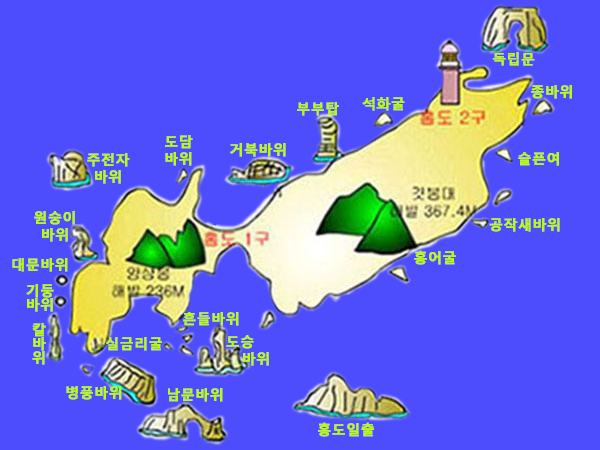
<style>
.page{position:relative;width:600px;height:450px;background:#4d4dfe}
.page>*{position:absolute;margin:0}
.t1{font:14px "MalgunGothicBold";color:#befc02;font-weight:bold}
.t2{font:14.1px "MalgunGothicBold";color:#befc02;font-weight:bold}
.t3{font:14.1px/14px "MalgunGothicBold";color:#befc02;font-weight:bold}
</style>
<div class="page">
<p class="t1" style="left:492px;top:52px;width:43px;height:14px">독립문</p>
<p class="t2" style="left:531px;top:85px;width:41px;height:14px">종바위</p>
<p class="t2" style="left:297px;top:102px;width:42px;height:14px">부부탑</p>
<p class="t1" style="left:362px;top:97px;width:43px;height:14px">석화굴</p>
<p class="t2" style="left:165px;top:135px;width:28px;height:31px">도담<br>바위</p>
<p class="t2" style="left:230px;top:143px;width:56px;height:14px">거북바위</p>
<p class="t2" style="left:87px;top:153px;width:43px;height:31px;text-align:center">주전자<br>바위</p>
<p class="t2" style="left:518px;top:152px;width:41px;height:14px">슬픈여</p>
<p class="t2" style="left:34px;top:211px;width:41px;height:31px;text-align:center">원숭이<br>바위</p>
<p class="t2" style="left:489px;top:218px;width:71px;height:14px">공작새바위</p>
<p class="t2" style="left:414px;top:250px;width:42px;height:15px">홍어굴</p>
<p class="t2" style="left:12px;top:258px;width:56px;height:14px">대문바위</p>
<p class="t3" style="left:26px;top:284px;width:28px;height:28px;text-align:center">기둥<br>바위</p>
<p class="t2" style="left:183px;top:312px;width:56px;height:14px">흔들바위</p>
<p class="t3" style="left:32px;top:323px;width:14px;height:42px;text-align:center">칼<br>바<br>위</p>
<p class="t2" style="left:106px;top:337px;width:56px;height:14px">실금리굴</p>
<p class="t2" style="left:226px;top:335px;width:43px;height:31px;text-align:center">도승<br>      바위</p>
<p class="t2" style="left:66px;top:386px;width:56px;height:14px">병풍바위</p>
<p class="t2" style="left:168px;top:388px;width:55px;height:14px">남문바위</p>
<p class="t2" style="left:318px;top:422px;width:56px;height:15px">홍도일출</p>
</div>
